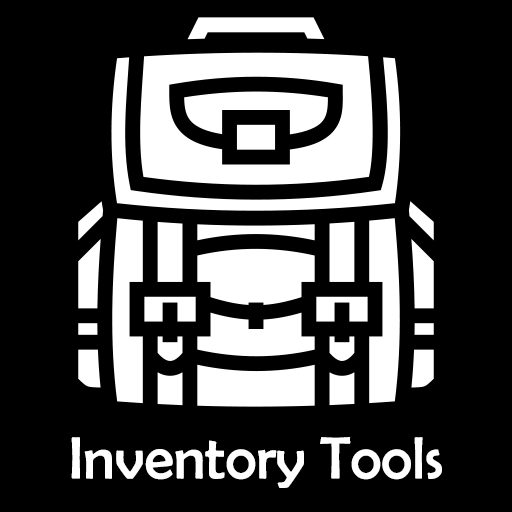
<style>
.page{position:relative;width:512px;height:512px;background:#000000}
.page>*{position:absolute;margin:0}
.t1{font:60px "BerlinSansFB-Reg";color:#ffffff}
</style>
<div class="page">
<p class="t1" style="left:71px;top:437px;width:371px;height:51px">Inventory Tools</p>
</div>
